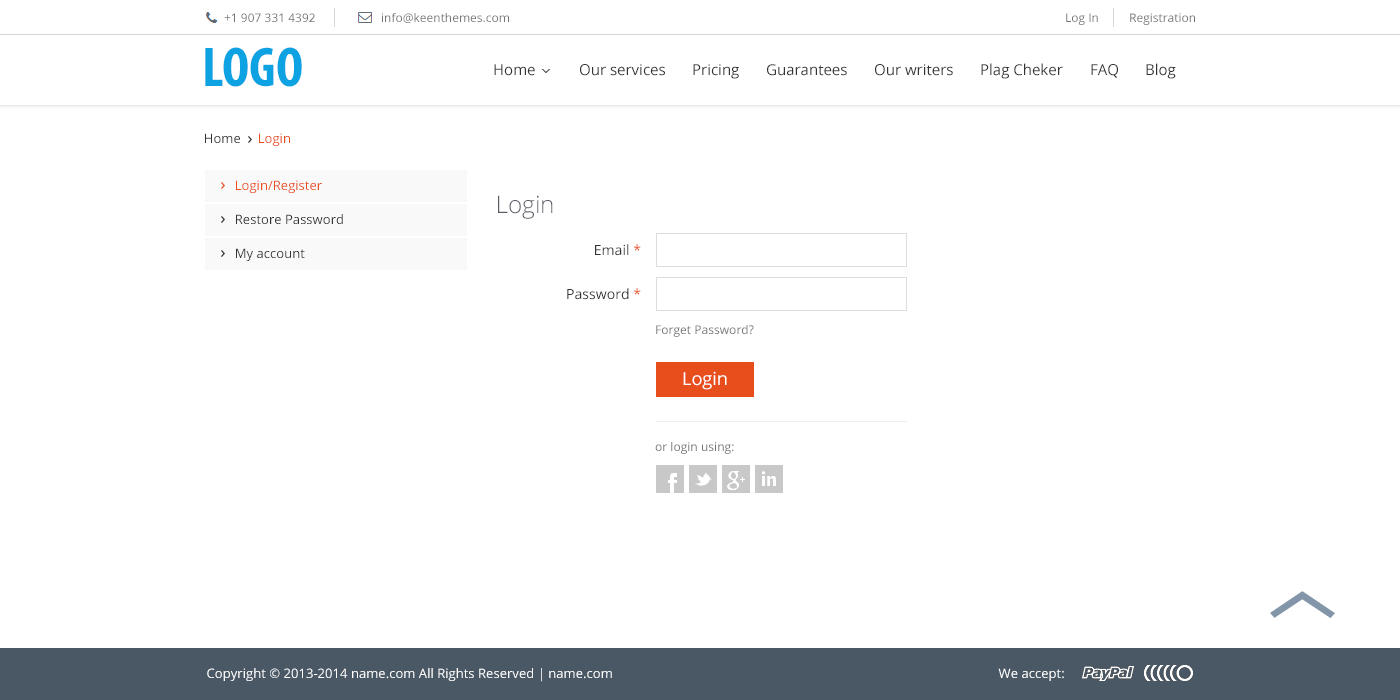
<style>
.page{position:relative;width:1400px;height:700px;background:#ffffff}
.page>*{position:absolute;margin:0}
.t1{font:12px "OpenSans";color:#737373}
.t2{font:56.6px "MyriadPro-BoldCond";color:#0da3e2}
.t3{font:15px "OpenSans";color:#333333}
.t4{font:13px "OpenSans";color:#e84d1c}
.t5{font:13px "OpenSans";color:#333333}
.t6{font:24px "OpenSans-Light";color:#5a5d66}
.t7{font:14px "OpenSans";color:#333333}
.t8{font:14px "OpenSans";color:#e84d1c}
.t9{font:12px "OpenSans";color:#727272}
.t10{font:18px "OpenSans";color:#ffffff}
</style>
<div class="page">
<p class="t1" style="left:224px;top:13px;width:91px;height:9px">+1 907 331 4392</p>
<p class="t1" style="left:382px;top:13px;width:127px;height:10px">info@keenthemes.com</p>
<p class="t1" style="left:1066px;top:13px;width:32px;height:12px">Log In</p>
<p class="t1" style="left:1130px;top:13px;width:65px;height:12px">Registration</p>
<p class="t2" style="left:205px;top:47px;width:97px;height:40px">LOGO</p>
<p class="t3" style="left:494px;top:64px;width:41px;height:12px">Home</p>
<p class="t3" style="left:580px;top:64px;width:85px;height:12px">Our services</p>
<p class="t3" style="left:693px;top:64px;width:46px;height:15px">Pricing</p>
<p class="t3" style="left:767px;top:64px;width:80px;height:12px">Guarantees</p>
<p class="t3" style="left:875px;top:64px;width:78px;height:12px">Our writers</p>
<p class="t3" style="left:981px;top:63px;width:82px;height:16px">Plag Cheker</p>
<p class="t3" style="left:1091px;top:64px;width:27px;height:14px">FAQ</p>
<p class="t3" style="left:1146px;top:63px;width:30px;height:16px">Blog</p>
<p class="t4" style="left:205px;top:133px;width:85px;height:13px"><span class="t5">Home     </span>Login</p>
<p class="t4" style="left:236px;top:180px;width:86px;height:13px">Login/Register</p>
<p class="t6" style="left:498px;top:195px;width:55px;height:24px">Login</p>
<p class="t5" style="left:236px;top:214px;width:107px;height:10px">Restore Password</p>
<p class="t7" style="left:595px;top:244px;width:46px;height:12px">Email <span class="t8">*</span></p>
<p class="t5" style="left:236px;top:248px;width:69px;height:13px">My account</p>
<p class="t7" style="left:567px;top:288px;width:74px;height:12px">Password <span class="t8">*</span></p>
<p class="t9" style="left:656px;top:325px;width:98px;height:12px">Forget Password?</p>
<p class="t10" style="left:683px;top:371px;width:44px;height:19px">Login</p>
<p class="t9" style="left:655px;top:442px;width:79px;height:12px">or login using:</p>
</div>
